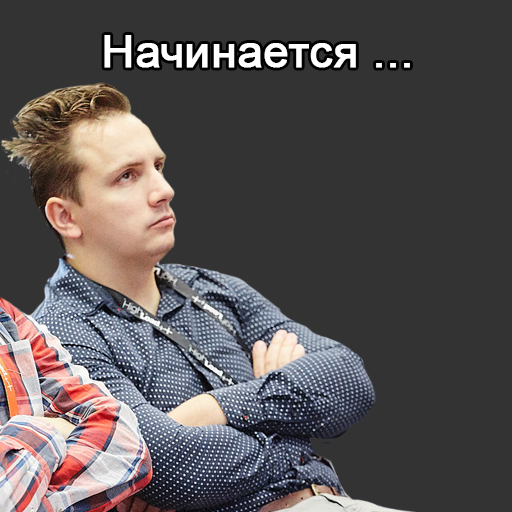
<style>
.page{position:relative;width:512px;height:512px;background:#333333}
.page>*{position:absolute;margin:0}
.t1{font:45px "ArialMT";color:#ffffff;font-weight:bold}
</style>
<div class="page">
<p class="t1" style="left:104px;top:35px;width:306px;height:33px">Начинается ...</p>
</div>
